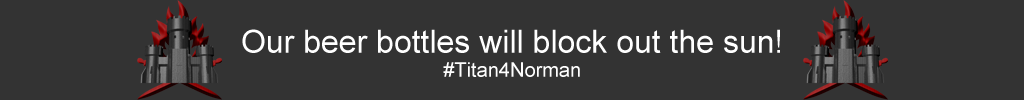
<style>
.page{position:relative;width:1024px;height:100px;background:#333333}
.page>*{position:absolute;margin:0}
.t1{font:32px "ArialMT";color:#ffffff}
.t2{font:20px "ArialMT";color:#ffffff}
</style>
<div class="page">
<p class="t1" style="left:242px;top:29px;width:538px;height:48px;text-align:center">Our beer bottles will block out the sun!<br><span class="t2">#Titan4Norman</span></p>
</div>
